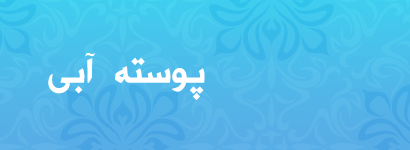
<style>
.page{position:relative;width:410px;height:150px}
.page>*{position:absolute;margin:0}
.t1{font:71px "Mj_LinerXL";color:#ffffff}
</style>
<div class="page">
<p class="t1" style="left:48px;top:52px;width:157px;height:48px">پوسته  آبی</p>
</div>
